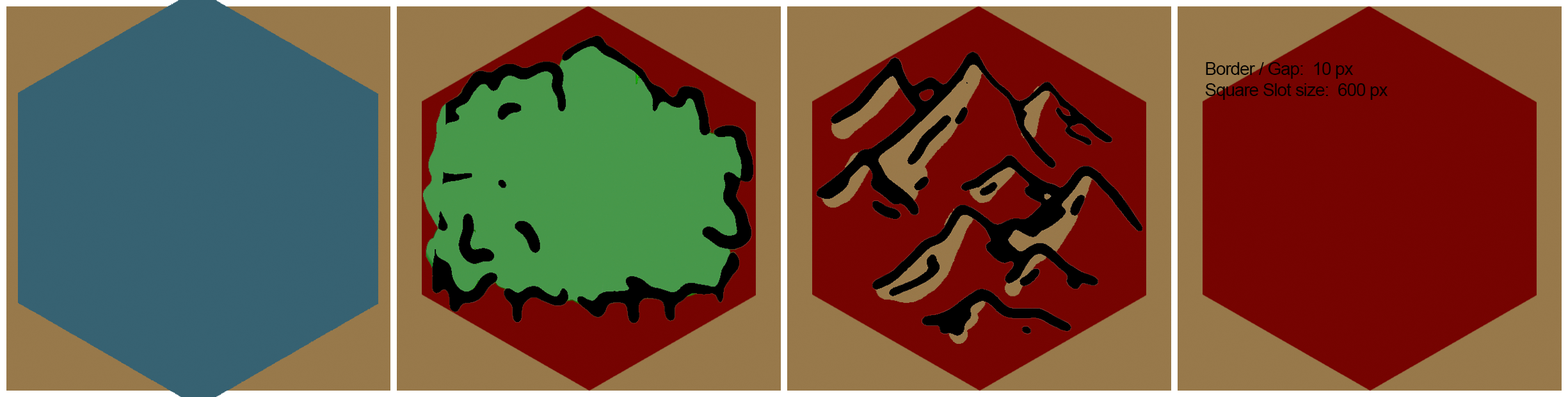
<style>
.page{position:relative;width:1568px;height:397px}
.page>*{position:absolute;margin:0}
.t1{font:17.6px "ArialMT";letter-spacing:-0.03em;color:#000000}
</style>
<div class="page">
<p class="t1" style="left:1205px;top:62px;width:183px;height:38px">Border / Gap:  10 px<br>Square Slot size:  600 px</p>
</div>
